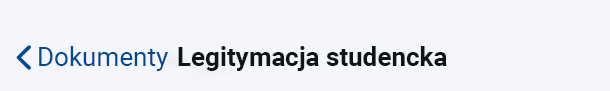
<style>
.page{position:relative;width:610px;height:91px;background:#f4f6fb}
.page>*{position:absolute;margin:0}
.t1{font:26px "Roboto-Regular";color:#014a93}
.t2{font:26px "Roboto-Bold";color:#101317}
</style>
<div class="page">
<p class="t1" style="left:39px;top:46px;width:129px;height:25px">Dokumenty</p>
<p class="t2" style="left:178px;top:46px;width:269px;height:25px">Legitymacja studencka</p>
</div>
